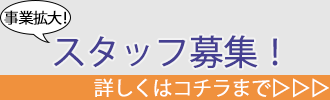
<style>
.page{position:relative;width:330px;height:100px;background:#e6e6e6}
.page>*{position:absolute;margin:0}
.t1{font:15px "KozGoPr6N-Regular";letter-spacing:-0.03em;color:#000000;font-weight:bold}
.t2{font:34.4px "KozGoPr6N-Regular";letter-spacing:-0.03em;color:#453f91;font-weight:bold}
.t3{font:19.7px "KozGoPr6N-Regular";letter-spacing:-0.03em;color:#ffffff;font-weight:bold}
</style>
<div class="page">
<p class="t1" style="left:4px;top:10px;width:63px;height:15px">事業拡大！</p>
<p class="t2" style="left:54px;top:35px;width:224px;height:34px">スタッフ募集！</p>
<p class="t3" style="left:94px;top:78px;width:235px;height:20px">詳しくはコチラまで▷▷▷</p>
</div>
